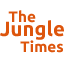
<style>
.page{position:relative;width:64px;height:64px;background:#ffffff}
.page>*{position:absolute;margin:0}
.t1{font:15.4px "Ubuntu-Bold";color:#dd550c}
.t2{font:20.5px "Ubuntu-Bold";color:#dd550c}
</style>
<div class="page">
<p class="t1" style="left:8px;top:10px;width:28px;height:13px">The</p>
<p class="t2" style="left:0px;top:20px;width:64px;height:20px">Jungle</p>
<p class="t1" style="left:20px;top:40px;width:43px;height:13px">Times</p>
</div>
